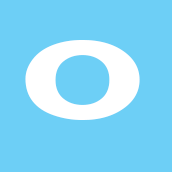
<style>
.page{position:relative;width:172px;height:172px;background:#6dcff6}
.page>*{position:absolute;margin:0}
.t1{font:146.5px "Arial-BoldMT";color:#ffffff;scale:1.45 1}
</style>
<div class="page">
<p class="t1" style="left:25px;top:40px;width:115px;height:80px">o</p>
</div>
